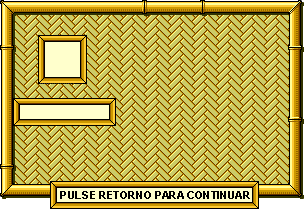
<style>
.page{position:relative;width:304px;height:209px;background:#cccc66}
.page>*{position:absolute;margin:0}
.t1{font:11.4px "Arial-BoldMT";color:#000000}
</style>
<div class="page">
<p class="t1" style="left:60px;top:191px;width:190px;height:8px">PULSE RETORNO PARA CONTINUAR</p>
</div>
